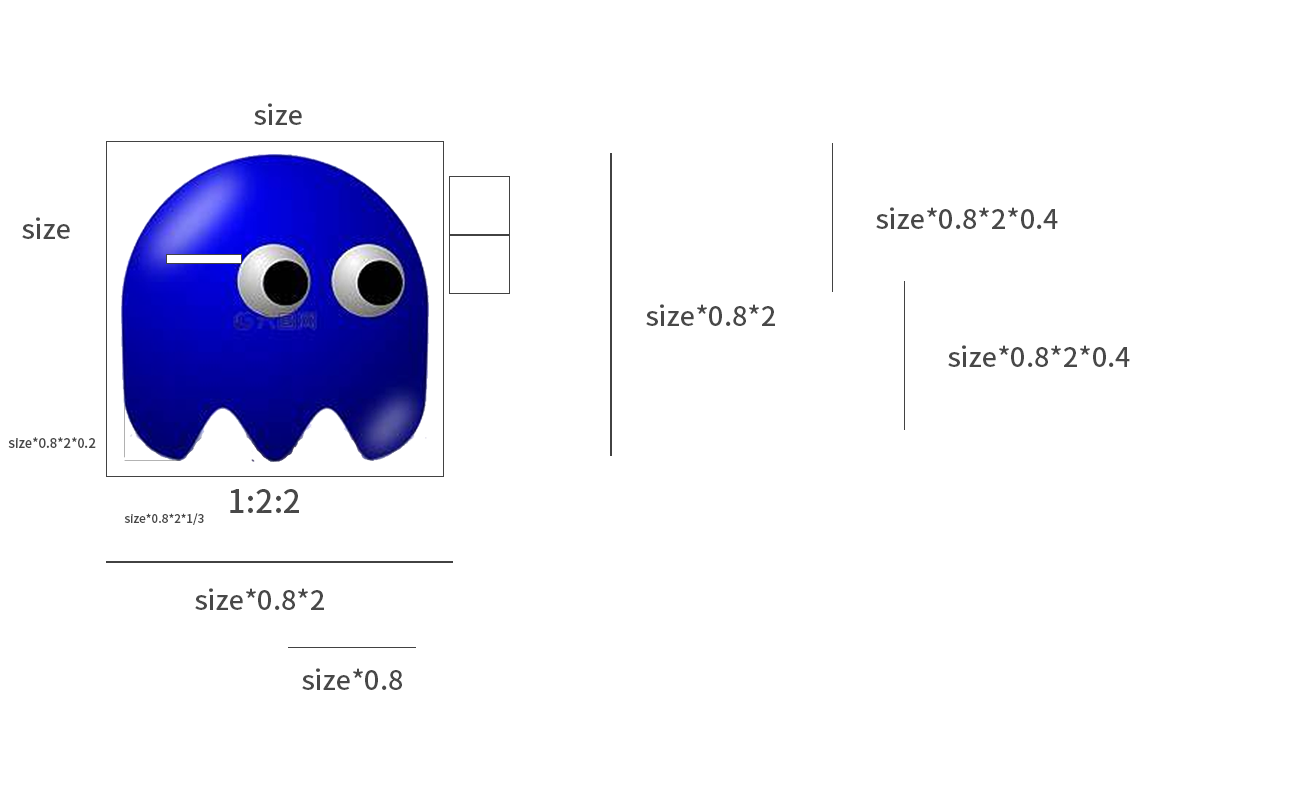
<style>
.page{position:relative;width:1291px;height:807px;background:#ffffff}
.page>*{position:absolute;margin:0}
.t1{font:27.2px "SourceHanSansCN-Medium";color:#484848}
.t2{font:13px "SourceHanSansCN-Medium";color:#484848}
.t3{font:31.7px "SourceHanSansCN-Medium";color:#484848}
.t4{font:11.7px "SourceHanSansCN-Medium";color:#484848}
</style>
<div class="page">
<p class="t1" style="left:254px;top:103px;width:48px;height:22px">size</p>
<p class="t1" style="left:876px;top:207px;width:182px;height:22px">size*0.8*2*0.4</p>
<p class="t1" style="left:22px;top:217px;width:48px;height:22px">size</p>
<p class="t1" style="left:646px;top:304px;width:129px;height:22px">size*0.8*2</p>
<p class="t1" style="left:948px;top:345px;width:182px;height:22px">size*0.8*2*0.4</p>
<p class="t2" style="left:8px;top:437px;width:88px;height:11px">size*0.8*2*0.2</p>
<p class="t3" style="left:230px;top:489px;width:69px;height:24px">1:2:2</p>
<p class="t4" style="left:124px;top:513px;width:80px;height:12px">size*0.8*2*1/3</p>
<p class="t1" style="left:195px;top:588px;width:129px;height:22px">size*0.8*2</p>
<p class="t1" style="left:302px;top:668px;width:100px;height:22px">size*0.8</p>
</div>
